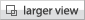
<style>
.page{position:relative;width:85px;height:20px;background:#ffffff}
.page>*{position:absolute;margin:0}
.t1{font:12px "MyriadPro-Regular";color:#3d3d3d}
</style>
<div class="page">
<p class="t1" style="left:24px;top:5px;width:55px;height:12px">larger view</p>
</div>
